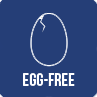
<style>
.page{position:relative;width:97px;height:97px;background:#253e77}
.page>*{position:absolute;margin:0}
.t1{font:18px "BebasNeue";color:#ffffff}
</style>
<div class="page">
<p class="t1" style="left:23px;top:73px;width:52px;height:13px">egg-free</p>
</div>
